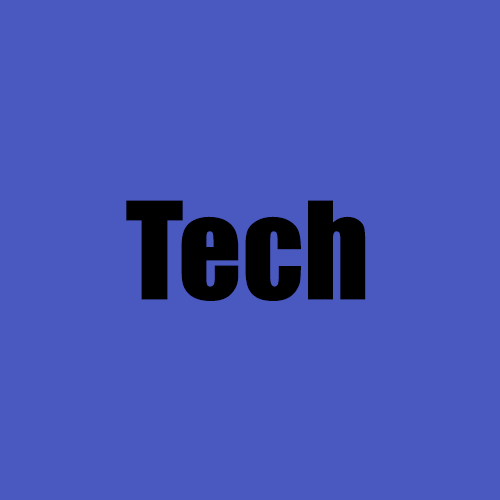
<style>
.page{position:relative;width:500px;height:500px;background:#4a59bf}
.page>*{position:absolute;margin:0}
.t1{font:125px "Impact";color:#000000}
</style>
<div class="page">
<p class="t1" style="left:126px;top:200px;width:240px;height:101px">Tech</p>
</div>
